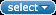
<style>
.page{position:relative;width:56px;height:15px}
.page>*{position:absolute;margin:0}
.t1{font:10px "Verdana";letter-spacing:0.02em;color:#ffffff}
</style>
<div class="page">
<p class="t1" style="left:8px;top:3px;width:30px;height:8px">select</p>
<p class="t1" style="left:8px;top:3px;width:30px;height:8px;opacity:0.35">select</p>
</div>
